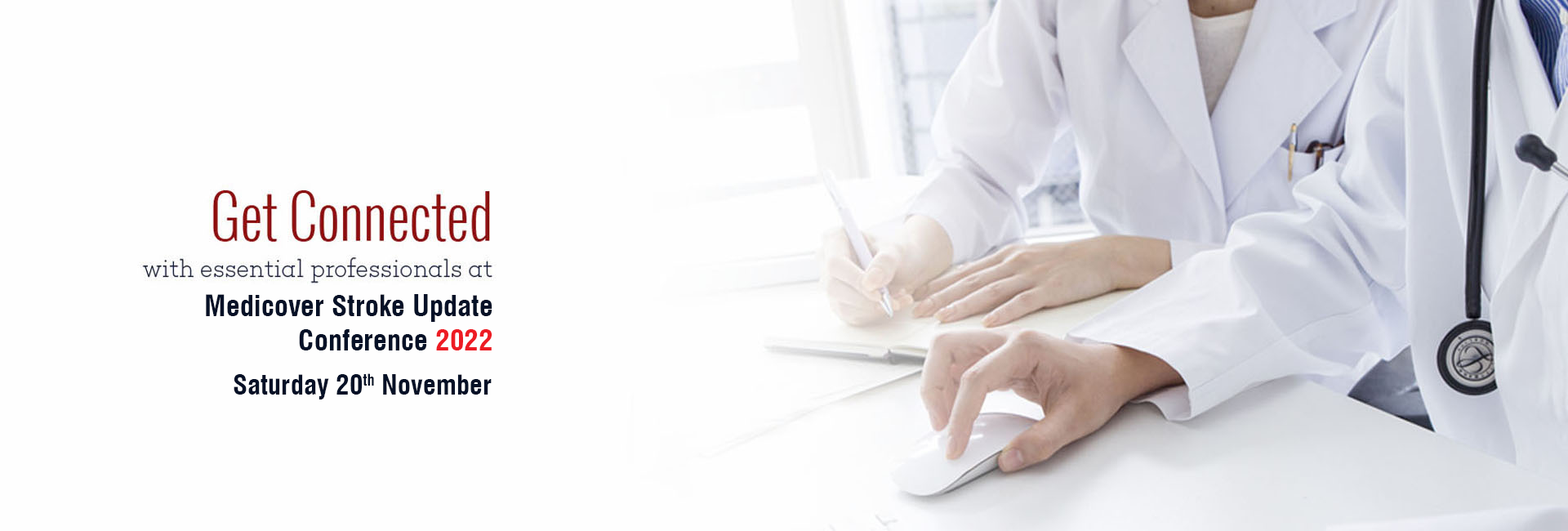
<style>
.page{position:relative;width:1568px;height:531px;background:#fefefe}
.page>*{position:absolute;margin:0}
.t1{font:28.9px/34px "Swiss721BT-BoldCondensed";color:#061127}
.t2{font:28.9px/34px "Swiss721BT-BoldCondensed";color:#ed1c24}
.t3{font:27.2px "Swiss721BT-BoldCondensed";color:#061127}
</style>
<div class="page">
<p class="t1" style="left:206px;top:294px;width:286px;height:56px;text-align:right">Medicover Stroke Update<br>Conference <span class="t2">2022</span></p>
<p class="t3" style="left:234px;top:373px;width:258px;height:26px">Saturday 20th November</p>
</div>
